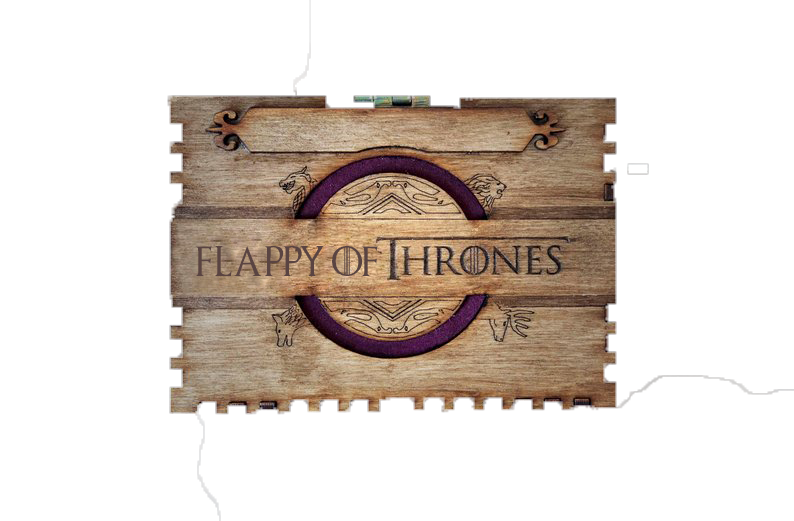
<style>
.page{position:relative;width:794px;height:521px;background:#ffffff}
.page>*{position:absolute;margin:0}
.t1{font:30px "GameofThrones";color:#594442}
</style>
<div class="page">
<p class="t1" style="left:195px;top:246px;width:183px;height:30px">Flappy of</p>
</div>
